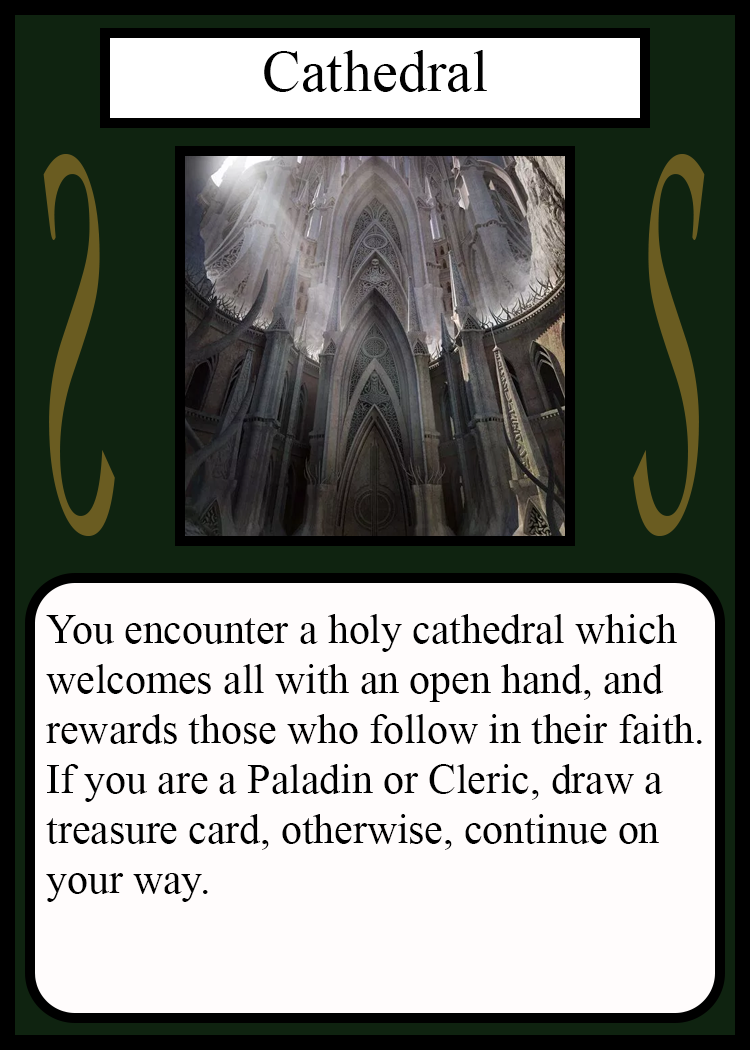
<style>
.page{position:relative;width:750px;height:1050px;background:#fffcfc}
.page>*{position:absolute;margin:0}
.t1{font:58.3px "TimesNewRomanPSMT";color:#010101}
.t2{font:548.5px "Apple-Chancery";color:#6a5c21;scale:0.27 1}
.t3{font:548.2px "Apple-Chancery";color:#6a5c21;scale:0.27 1}
.t4{font:41.7px "TimesNewRomanPSMT";color:#000000}
</style>
<div class="page">
<p class="t1" style="left:264px;top:50px;width:223px;height:42px">Cathedral</p>
<p class="t2" style="left:43px;top:154px;width:72px;height:382px;rotate:180deg">S</p>
<p class="t3" style="left:633px;top:154px;width:72px;height:382px">S</p>
<p class="t4" style="left:46px;top:614px;width:656px;height:288px">You encounter a holy cathedral which<br>welcomes all with an open hand, and<br>rewards those who follow in their faith.<br>If you are a Paladin or Cleric, draw a <br>treasure card, otherwise, continue on<br>your way.</p>
</div>
